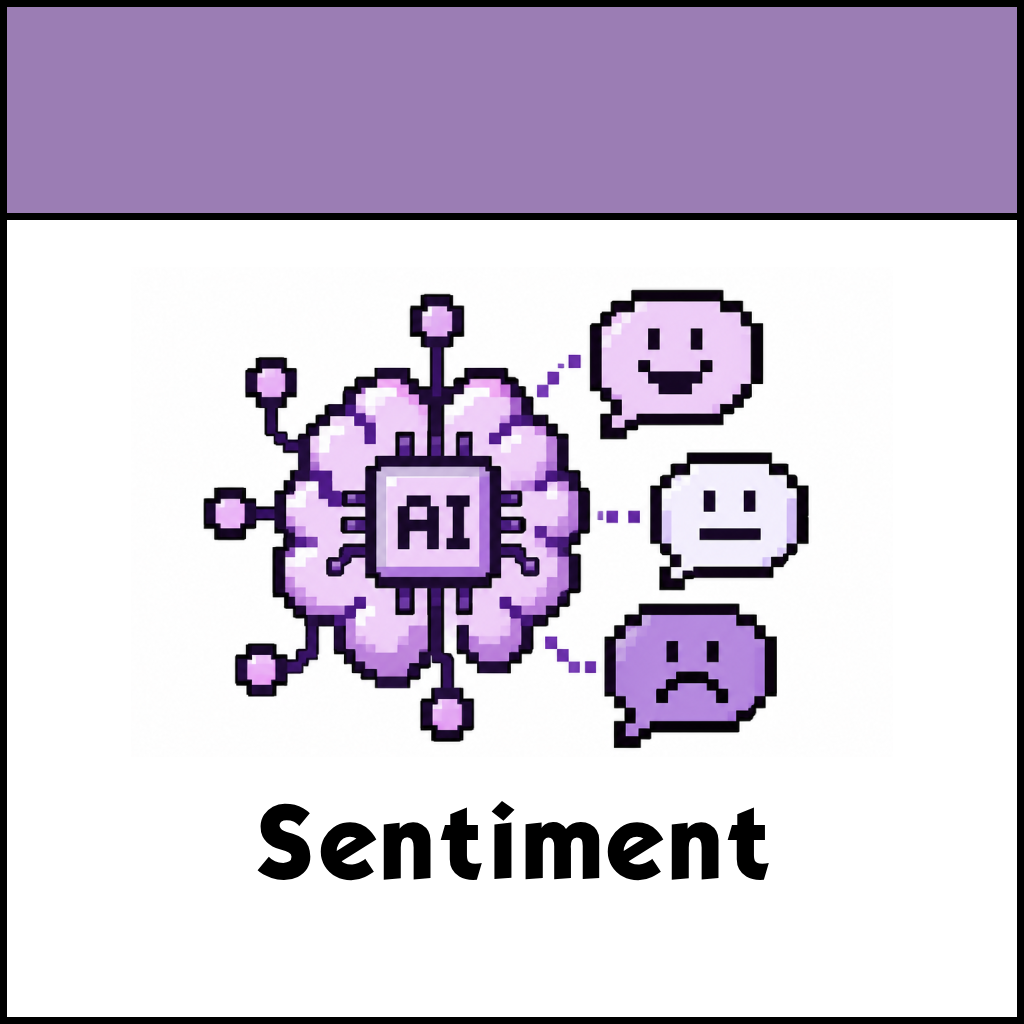
<style>
.page{position:relative;width:1024px;height:1024px;background:#ffffff}
.page>*{position:absolute;margin:0}
.t1{font:90px "KabelBdNormal";color:#000000}
</style>
<div class="page">
<p class="t1" style="left:257px;top:800px;width:512px;height:81px">Sentiment</p>
</div>
